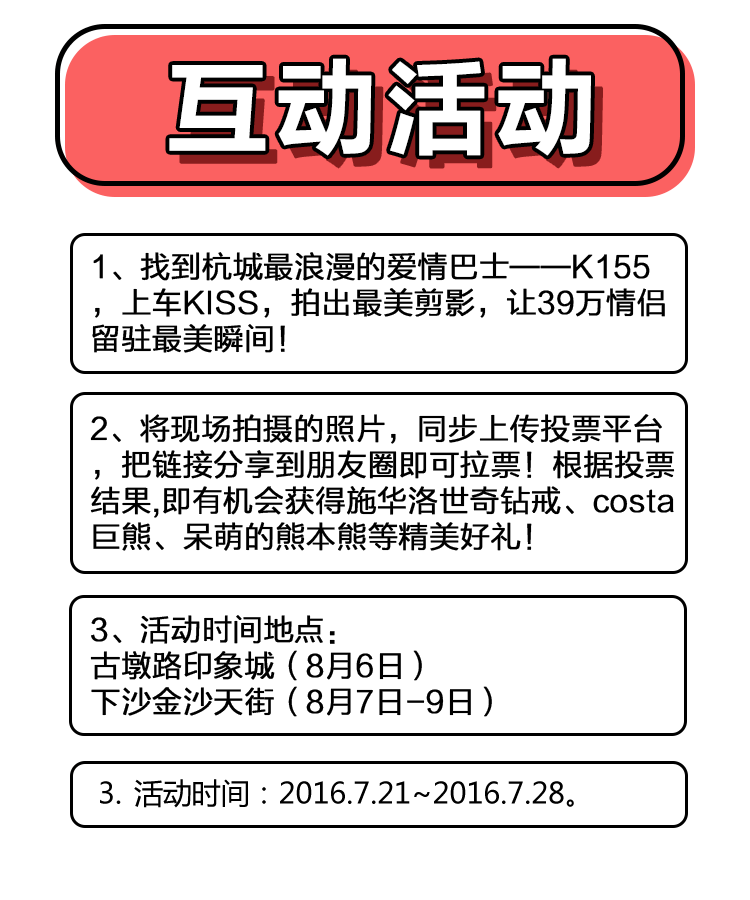
<style>
.page{position:relative;width:750px;height:900px;background:#ffffff}
.page>*{position:absolute;margin:0}
.t1{font:30px/36px "FZLTXHK";color:#000000;font-weight:bold}
</style>
<div class="page">
<p class="t1" style="left:92px;top:252px;width:573px;height:101px">1、找到杭城最浪漫的爱情巴士——K155，上车KISS，拍出最美剪影，让39万情侣留驻最美瞬间！</p>
<p class="t1" style="left:90px;top:414px;width:585px;height:137px">2、将现场拍摄的照片，同步上传投票平台，把链接分享到朋友圈即可拉票！根据投票结果,即有机会获得施华洛世奇钻戒、costa巨熊、呆萌的熊本熊等精美好礼！</p>
<p class="t1" style="left:90px;top:615px;width:402px;height:102px">3、活动时间地点：<br>古墩路印象城（8月6日） <br>下沙金沙天街（8月7日-9日）</p>
</div>
